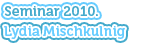
<style>
.page{position:relative;width:160px;height:44px;background:#ffffff}
.page>*{position:absolute;margin:0}
.t1{font:14px "Museo-700";color:#44aacc}
.t2{font:14px "Museo-700";color:#66ccff}
</style>
<div class="page">
<p class="t1" style="left:4px;top:6px;width:94px;height:10px">Seminar 2010.</p>
<p class="t1" style="left:4px;top:6px;width:94px;height:10px">Seminar 2010.</p>
<p class="t2" style="left:4px;top:26px;width:121px;height:13px">Lydia Mischkulnig</p>
<p class="t2" style="left:4px;top:26px;width:121px;height:13px">Lydia Mischkulnig</p>
</div>
